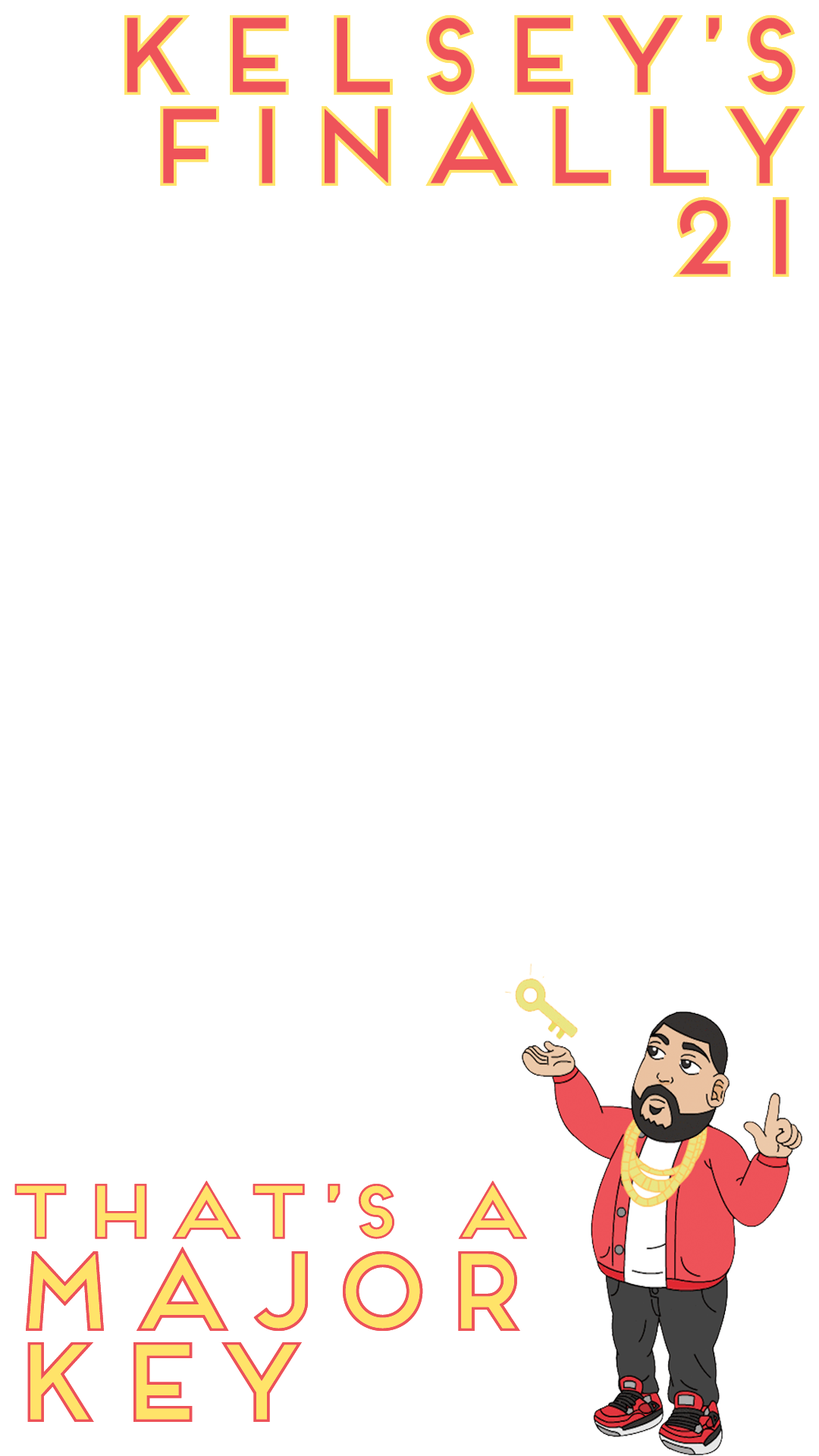
<style>
.page{position:relative;width:819px;height:1456px;background:#ffffff}
.page>*{position:absolute;margin:0}
.t1{font:106.2px/91px "Frontage-Outline";color:#ffe369}
.t2{font:72.8px "Frontage-Outline";color:#ee5359;scale:1.08 1}
.t3{font:106.2px "Frontage-Outline";color:#ed5258}
</style>
<div class="page">
<p class="t1" style="left:124px;top:15px;width:681px;height:262px;text-align:right">Kelsey’s Finally 21</p>
<p class="t2" style="left:14px;top:1181px;width:513px;height:58px">That’s A</p>
<p class="t3" style="left:26px;top:1247px;width:494px;height:175px">Major Key</p>
</div>
